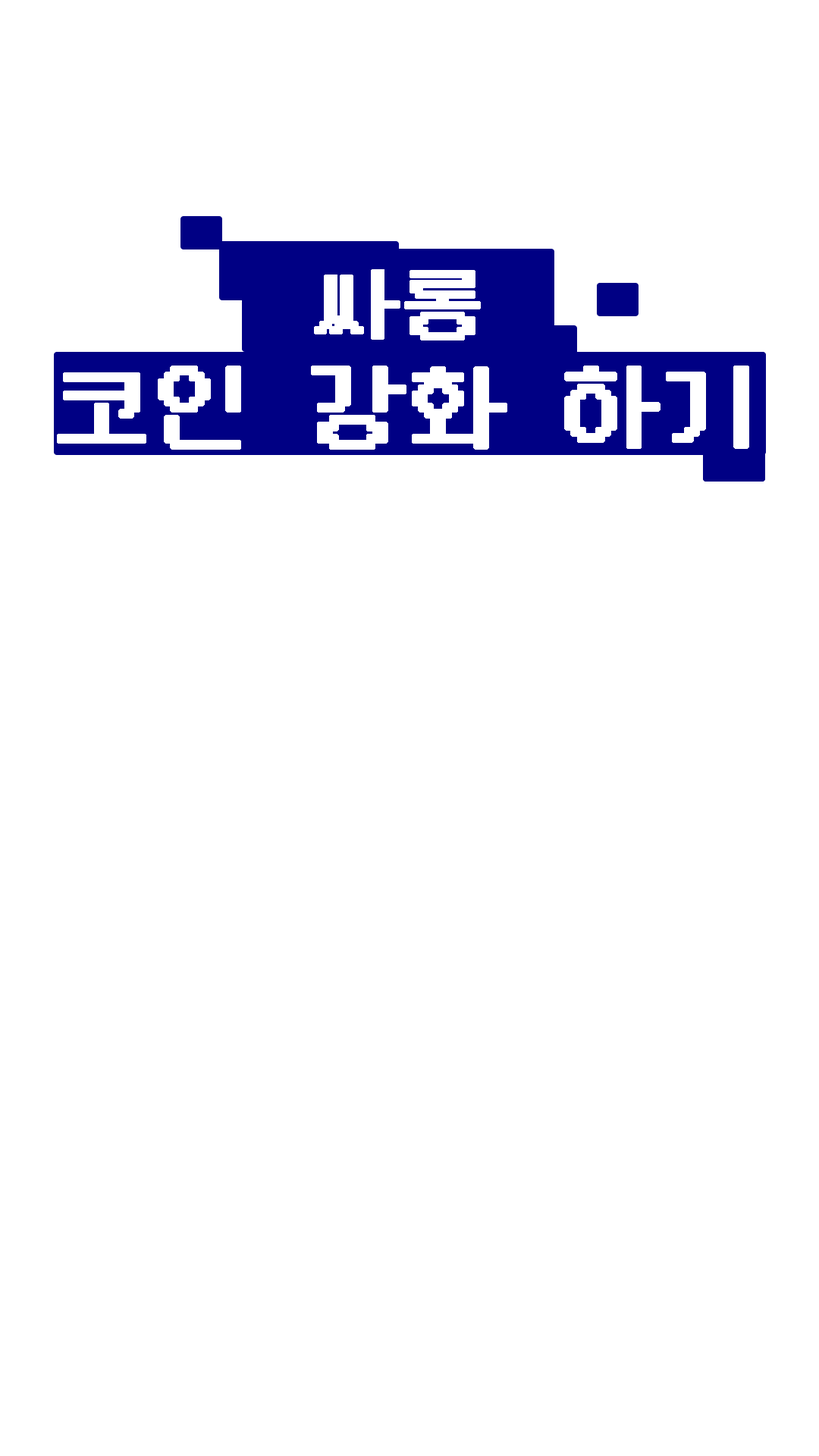
<style>
.page{position:relative;width:819px;height:1456px;background:#ffffff}
.page>*{position:absolute;margin:0}
.t1{font:83.4px "DungGeunMo";color:#ffffff;font-weight:bold}
.t2{font:98.6px "DungGeunMo";color:#ffffff;font-weight:bold}
</style>
<div class="page">
<p class="t1" style="left:314px;top:269px;width:167px;height:71px">싸롱</p>
<p class="t2" style="left:57px;top:366px;width:692px;height:84px">코인 강화 하기</p>
</div>
